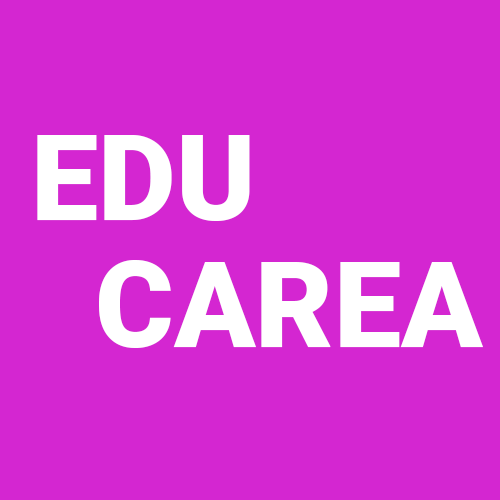
<style>
.page{position:relative;width:500px;height:500px;background:#d426d1}
.page>*{position:absolute;margin:0}
.t1{font:120px "Roboto-Black";color:#ffffff}
</style>
<div class="page">
<p class="t1" style="left:37px;top:135px;width:213px;height:86px">EDU</p>
<p class="t1" style="left:99px;top:260px;width:384px;height:88px">CAREA</p>
</div>
